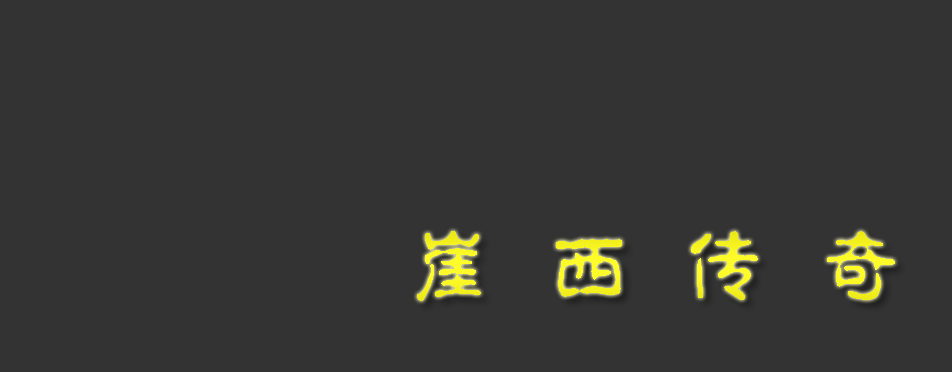
<style>
.page{position:relative;width:952px;height:372px;background:#333333}
.page>*{position:absolute;margin:0}
.t1{font:75px "CloudShuiZhuGBK";letter-spacing:0.76em;color:#f9f724;scale:1.03 1}
</style>
<div class="page">
<p class="t1" style="left:417px;top:231px;width:478px;height:70px">崖西传奇</p>
</div>
